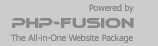
<style>
.page{position:relative;width:158px;height:46px;background:#cccccc}
.page>*{position:absolute;margin:0}
.t1{font:8.7px "Tahoma";color:#888888}
.t2{font:13.8px "Ethnocentric";color:#888888}
</style>
<div class="page">
<p class="t1" style="left:89px;top:4px;width:45px;height:9px">Powered by</p>
<p class="t2" style="left:12px;top:18px;width:122px;height:10px">php-fusion</p>
<p class="t1" style="left:10px;top:34px;width:123px;height:9px">The All-in-One Website Package</p>
</div>
